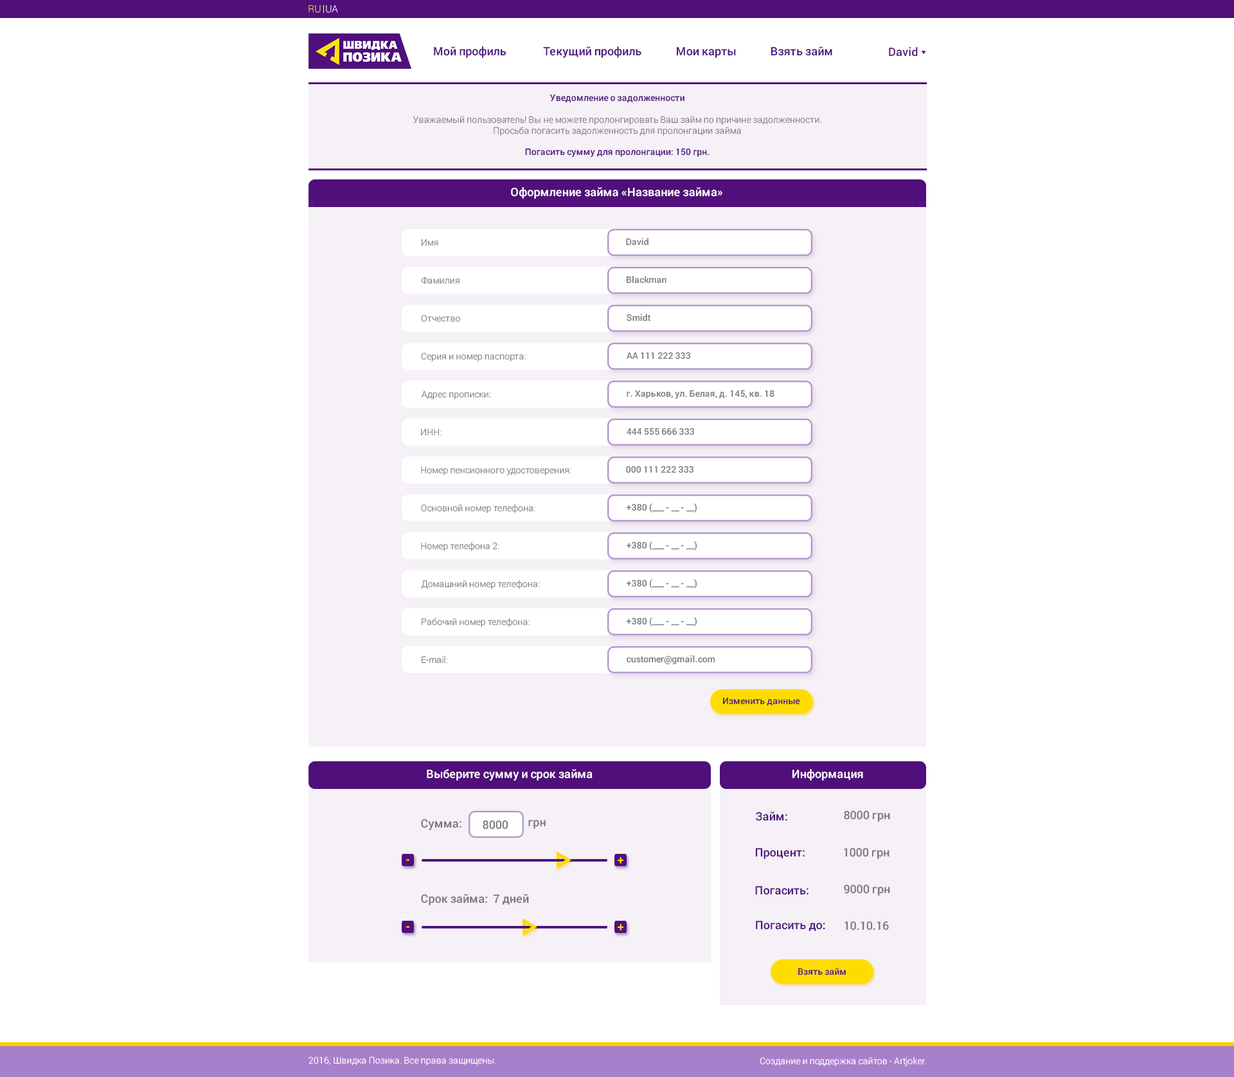
<style>
.page{position:relative;width:1234px;height:1077px;background:#ffffff}
.page>*{position:absolute;margin:0}
.t1{font:9.7px "Roboto-Thin";letter-spacing:0.005em;color:#ffdd15}
.t2{font:9.7px "Roboto-Thin";letter-spacing:0.005em;color:#ffffff}
.t3{font:11.6px "Roboto-Medium";letter-spacing:0.005em;color:#4f177d}
.t4{font:9px "Roboto-Light";letter-spacing:0.005em;color:#7a7a7a}
.t5{font:9px "Roboto-Medium";letter-spacing:0.005em;color:#4f177d}
.t6{font:11.6px "Roboto-Medium";letter-spacing:0.005em;color:#ffffff}
.t7{font:9px "Roboto-Medium";letter-spacing:0.005em;color:#7a7a7a}
.t8{font:11.6px "Roboto-Medium";letter-spacing:0.005em;color:#7a7a7a}
.t9{font:11.6px "Roboto-Medium";letter-spacing:0.005em;color:#ffdc00}
.t10{font:9px "Roboto-Light";letter-spacing:0.005em;color:#ffffff}
</style>
<div class="page">
<p class="t1" style="left:309px;top:5px;width:29px;height:8px">RU<span class="t2">  UA</span></p>
<p class="t3" style="left:434px;top:46px;width:399px;height:12px">Мой профиль              Текущий профиль             Мои карты             Взять займ</p>
<p class="t3" style="left:889px;top:47px;width:29px;height:10px">David</p>
<p class="t4" style="left:413px;top:94px;width:409px;height:64px;text-align:center"><span class="t5">Уведомление о задолженности<br></span><br>Уважаемый пользователь! Вы не можете пролонгировать Ваш займ по причине задолженности.<br>Просьба погасить задолженность для пролонгации займа<br><br><span class="t5">Погасить сумму для пролонгации: 150 грн.</span></p>
<p class="t6" style="left:511px;top:187px;width:212px;height:12px">Оформление займа «Название займа»</p>
<p class="t4" style="left:421px;top:239px;width:17px;height:7px">Имя</p>
<p class="t7" style="left:626px;top:238px;width:23px;height:8px">David</p>
<p class="t4" style="left:421px;top:276px;width:39px;height:8px">Фамилия</p>
<p class="t7" style="left:626px;top:276px;width:41px;height:8px">Blackman</p>
<p class="t4" style="left:421px;top:314px;width:39px;height:8px">Отчество</p>
<p class="t7" style="left:627px;top:314px;width:24px;height:7px">Smidt</p>
<p class="t4" style="left:421px;top:352px;width:105px;height:9px">Серия и номер паспорта:</p>
<p class="t7" style="left:627px;top:352px;width:63px;height:7px">AA 111 222 333</p>
<p class="t7" style="left:627px;top:390px;width:148px;height:9px">г. Харьков, ул. Белая, д. 145, кв. 18</p>
<p class="t4" style="left:422px;top:390px;width:69px;height:9px">Адрес прописки:</p>
<p class="t4" style="left:421px;top:428px;width:21px;height:8px">ИНН:</p>
<p class="t7" style="left:627px;top:428px;width:67px;height:7px">444 555 666 333</p>
<p class="t4" style="left:421px;top:466px;width:151px;height:10px">Номер пенсионного удостоверения:</p>
<p class="t7" style="left:626px;top:465px;width:68px;height:8px">000 111 222 333</p>
<p class="t4" style="left:421px;top:504px;width:115px;height:9px">Основной номер телефона:</p>
<p class="t7" style="left:626px;top:503px;width:72px;height:9px">+380 (___ - __ - __)</p>
<p class="t4" style="left:421px;top:542px;width:79px;height:9px">Номер телефона 2:</p>
<p class="t7" style="left:626px;top:541px;width:72px;height:9px">+380 (___ - __ - __)</p>
<p class="t4" style="left:421px;top:580px;width:119px;height:9px">Домашний номер телефона:</p>
<p class="t7" style="left:626px;top:579px;width:72px;height:9px">+380 (___ - __ - __)</p>
<p class="t4" style="left:422px;top:618px;width:108px;height:9px">Рабочий номер телефона:</p>
<p class="t7" style="left:626px;top:617px;width:72px;height:9px">+380 (___ - __ - __)</p>
<p class="t4" style="left:422px;top:656px;width:25px;height:7px">E-mail:</p>
<p class="t7" style="left:626px;top:655px;width:90px;height:10px">customer@gmail.com</p>
<p class="t5" style="left:723px;top:697px;width:77px;height:9px">Изменить данные</p>
<p class="t6" style="left:427px;top:769px;width:166px;height:11px">Выберите сумму и срок займа</p>
<p class="t6" style="left:792px;top:769px;width:71px;height:11px">Информация</p>
<p class="t8" style="left:421px;top:818px;width:41px;height:12px">Сумма:</p>
<p class="t8" style="left:483px;top:820px;width:26px;height:9px">8000</p>
<p class="t8" style="left:528px;top:820px;width:18px;height:9px">грн</p>
<p class="t3" style="left:756px;top:811px;width:32px;height:10px">Займ:</p>
<p class="t8" style="left:844px;top:810px;width:46px;height:12px">8000 грн</p>
<p class="t9" style="left:618px;top:857px;width:6px;height:6px">+</p>
<p class="t3" style="left:755px;top:848px;width:50px;height:11px">Процент:</p>
<p class="t8" style="left:844px;top:847px;width:46px;height:12px">1000 грн</p>
<p class="t9" style="left:406px;top:859px;width:4px;height:2px">-</p>
<p class="t8" style="left:421px;top:894px;width:108px;height:11px">Срок займа:  7 дней</p>
<p class="t3" style="left:755px;top:886px;width:54px;height:9px">Погасить:</p>
<p class="t8" style="left:844px;top:884px;width:46px;height:12px">9000 грн</p>
<p class="t9" style="left:406px;top:926px;width:4px;height:2px">-</p>
<p class="t9" style="left:618px;top:924px;width:6px;height:6px">+</p>
<p class="t3" style="left:756px;top:921px;width:69px;height:10px">Погасить до:</p>
<p class="t8" style="left:845px;top:921px;width:44px;height:9px">10.10.16</p>
<p class="t5" style="left:798px;top:968px;width:48px;height:7px">Взять займ</p>
<p class="t10" style="left:309px;top:1056px;width:187px;height:9px">2016, Швидка Позика. Все права защищены.</p>
<p class="t10" style="left:760px;top:1057px;width:166px;height:9px">Создание и поддержка сайтов - Artjoker.</p>
</div>
